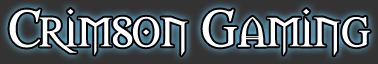
<style>
.page{position:relative;width:378px;height:64px;background:#333333}
.page>*{position:absolute;margin:0}
.t1{font:48px "Morpheus";color:#ffffff;scale:1.1 1}
</style>
<div class="page">
<p class="t1" style="left:9px;top:9px;width:361px;height:47px">Crimson Gaming</p>
</div>
